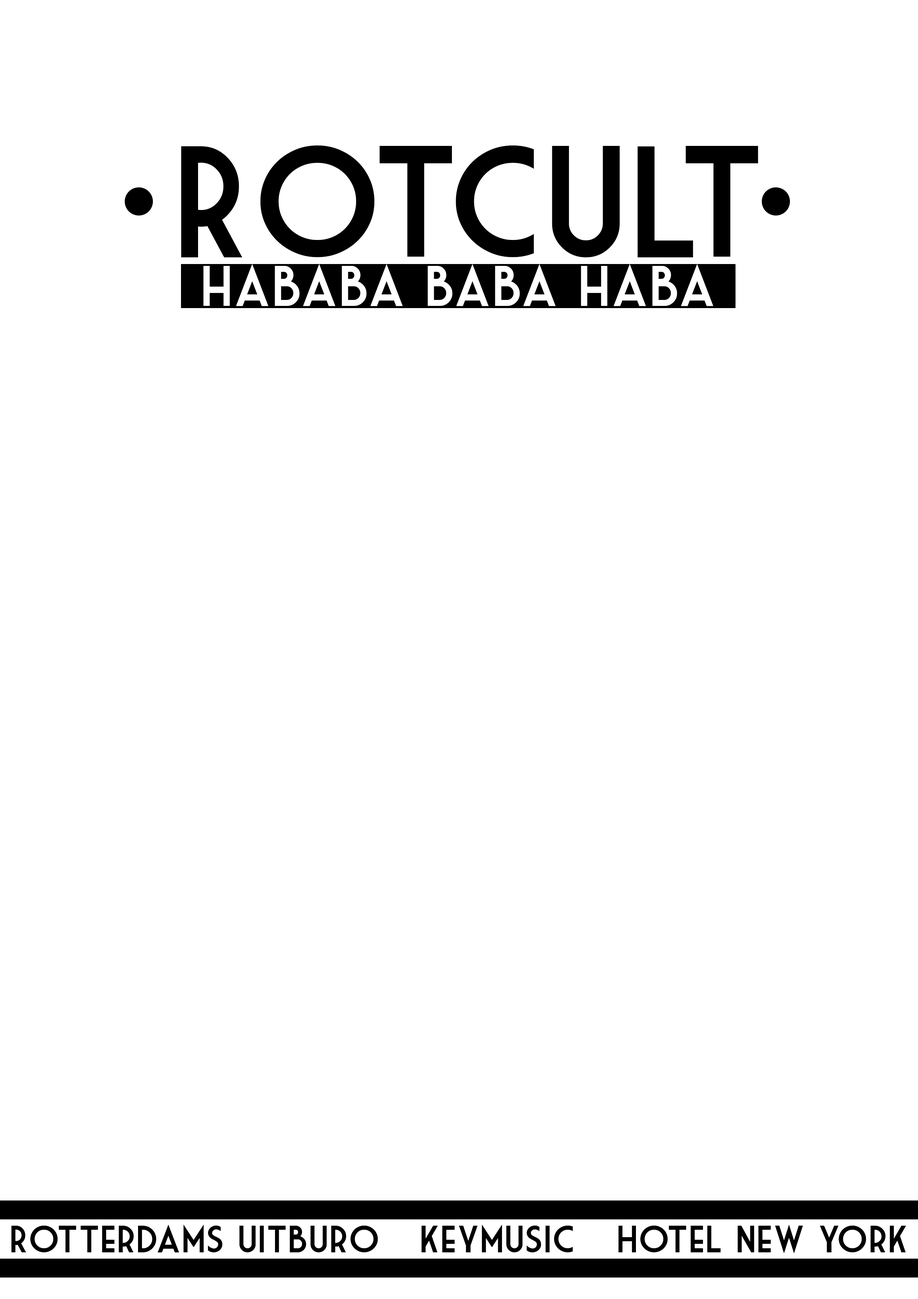
<style>
.page{position:relative;width:918px;height:1299px;background:#ffffff}
.page>*{position:absolute;margin:0}
.t1{font:154.3px "MarketDeco";color:#000000}
.t2{font:55.5px "MarketDeco";color:#ffffff}
.t3{font:37px "MarketDeco";color:#000000}
</style>
<div class="page">
<p class="t1" style="left:181px;top:145px;width:577px;height:112px">Rotcult</p>
<p class="t2" style="left:203px;top:264px;width:510px;height:42px">hababa baba haba</p>
<p class="t3" style="left:11px;top:1224px;width:367px;height:28px">Rotterdams Uitburo</p>
<p class="t3" style="left:421px;top:1224px;width:152px;height:28px">Keymusic</p>
<p class="t3" style="left:618px;top:1224px;width:288px;height:30px">Hotel New York</p>
</div>
